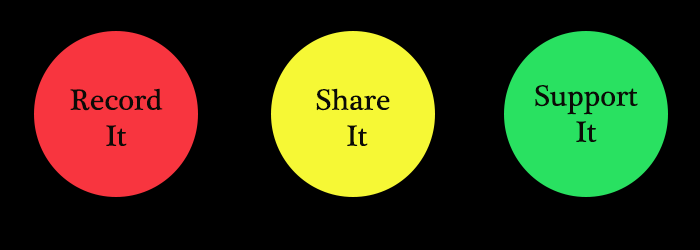
<style>
.page{position:relative;width:700px;height:250px;background:#000000}
.page>*{position:absolute;margin:0}
.t1{font:30px "PlantagenetCherokee";color:#0b0b07}
</style>
<div class="page">
<p class="t1" style="left:70px;top:88px;width:93px;height:58px;text-align:center">Record It</p>
<p class="t1" style="left:316px;top:88px;width:74px;height:58px;text-align:center">Share<br> It</p>
<p class="t1" style="left:535px;top:85px;width:103px;height:57px;text-align:center">Support It</p>
</div>
